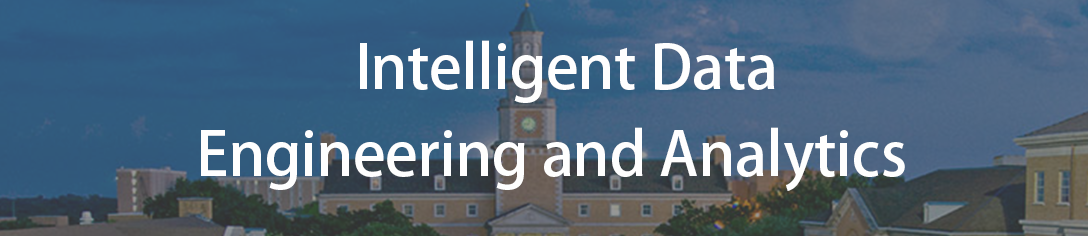
<style>
.page{position:relative;width:1088px;height:236px}
.page>*{position:absolute;margin:0}
.t1{font:60px "AdobeHeitiStd-Regular";color:#fefefe}
</style>
<div class="page">
<p class="t1" style="left:360px;top:40px;width:415px;height:63px">Intelligent Data</p>
<p class="t1" style="left:201px;top:127px;width:704px;height:64px">Engineering and Analytics</p>
</div>
